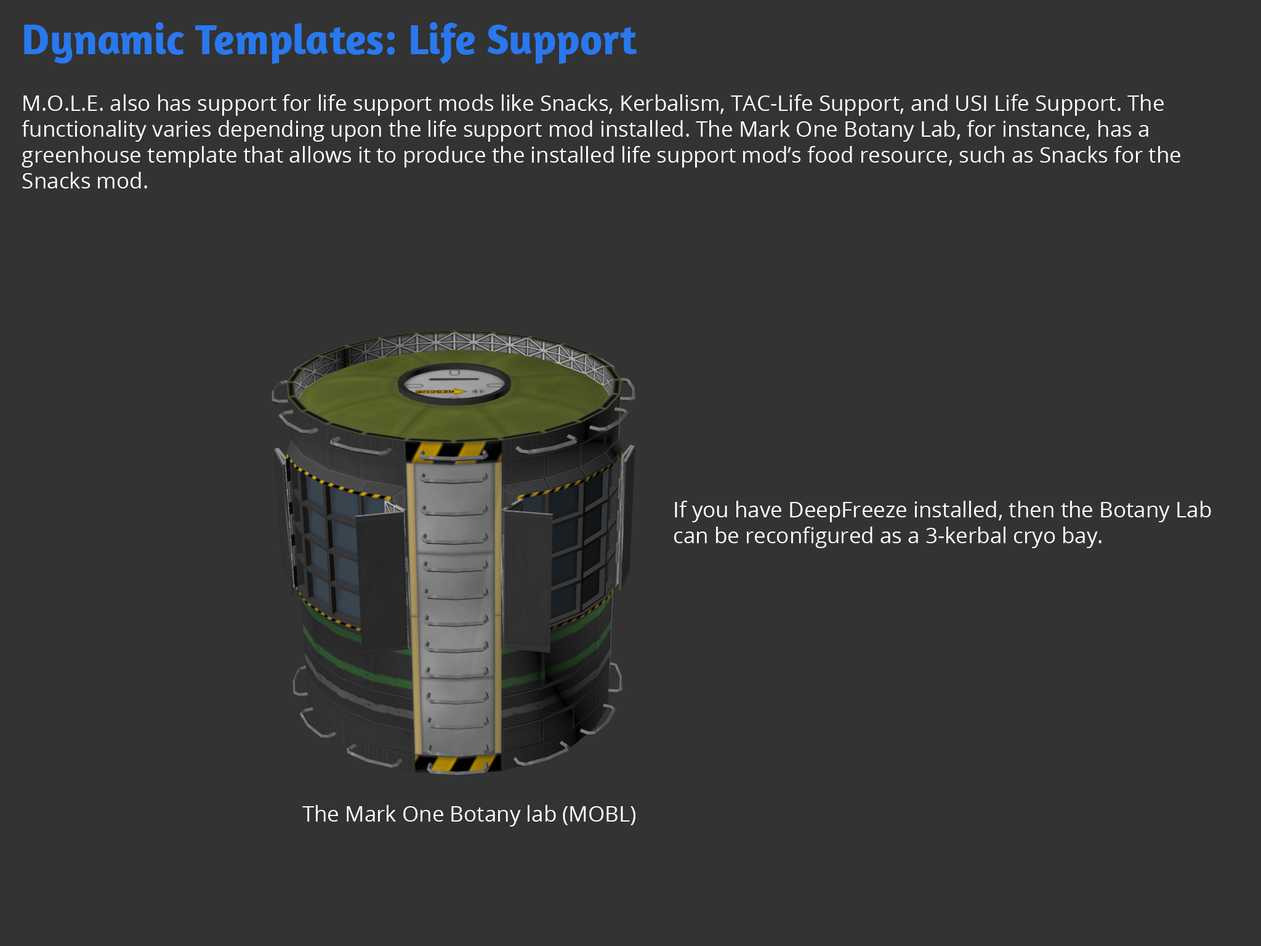
<style>
.page{position:relative;width:1261px;height:946px;background:#333333}
.page>*{position:absolute;margin:0}
.t1{font:43.1px "Amaranth-Bold";color:#2978ef}
.t2{font:21.5px "OpenSans";color:#ffffff}
</style>
<div class="page">
<p class="t1" style="left:24px;top:22px;width:613px;height:42px">Dynamic Templates: Life Support</p>
<p class="t2" style="left:22px;top:94px;width:1158px;height:94px">M.O.L.E. also has support for life support mods like Snacks, Kerbalism, TAC-Life Support, and USI Life Support. The functionality varies depending upon the life support mod installed. The Mark One Botany Lab, for instance, has a greenhouse template that allows it to produce the installed life support mod’s food resource, such as Snacks for the Snacks mod.</p>
<p class="t2" style="left:674px;top:501px;width:537px;height:47px">If you have DeepFreeze installed, then the Botany Lab<br>can be reconfigured as a 3-kerbal cryo bay.</p>
<p class="t2" style="left:302px;top:805px;width:333px;height:21px">The Mark One Botany lab (MOBL)</p>
</div>
